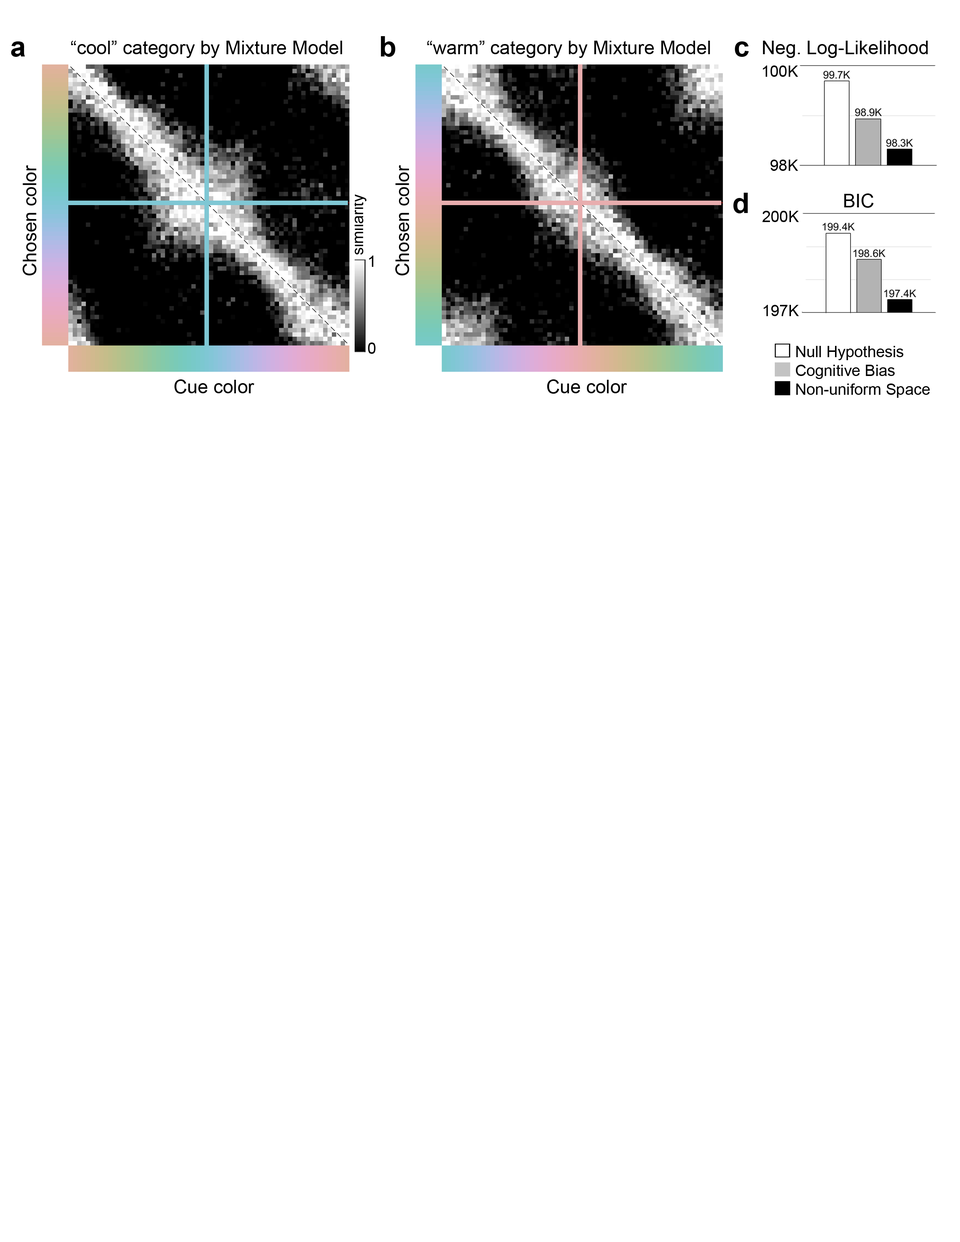
<style>
.page{position:relative;width:960px;height:1242px;background:#ffffff}
.page>*{position:absolute;margin:0}
.t1{font:18.8px "ArialMT";color:#000000}
.t2{font:15.7px "ArialMT";color:#000000}
.t3{font:15.7px/21.8px "ArialMT";color:#000000}
</style>
<div class="page">
<p class="t1" style="left:71px;top:41px;width:271px;height:17px">“cool” category by Mixture Model</p>
<p class="t1" style="left:427px;top:41px;width:283px;height:17px">“warm” category by Mixture Model</p>
<p class="t1" style="left:763px;top:41px;width:165px;height:17px">Neg. Log-Likelihood</p>
<p class="t2" style="left:763px;top:65px;width:35px;height:106px;text-align:right">100K<br><br><br><br><br>98K</p>
<p class="t1" style="left:23px;top:165px;width:14px;height:111px;rotate:-90deg">Chosen color</p>
<p class="t1" style="left:395px;top:165px;width:14px;height:111px;rotate:-90deg">Chosen color</p>
<p class="t2" style="left:352px;top:194px;width:15px;height:61px;rotate:-90deg">similarity</p>
<p class="t1" style="left:844px;top:193px;width:30px;height:15px">BIC</p>
<p class="t2" style="left:762px;top:211px;width:37px;height:105px;text-align:right">200K<br><br><br><br><br>197K</p>
<p class="t3" style="left:368px;top:256px;width:8px;height:98px">1<br><br><br><br>0</p>
<p class="t2" style="left:796px;top:346px;width:134px;height:52px">Null Hypothesis<br>Cognitive Bias<br>Non-uniform Space</p>
<p class="t1" style="left:174px;top:379px;width:80px;height:15px">Cue color</p>
<p class="t1" style="left:547px;top:379px;width:80px;height:15px">Cue color</p>
</div>
